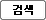
<style>
.page{position:relative;width:46px;height:20px;background:#ffffff}
.page>*{position:absolute;margin:0}
.t1{font:12px "morris9";color:#000000;font-weight:bold}
</style>
<div class="page">
<p class="t1" style="left:13px;top:5px;width:20px;height:10px">검색</p>
</div>
